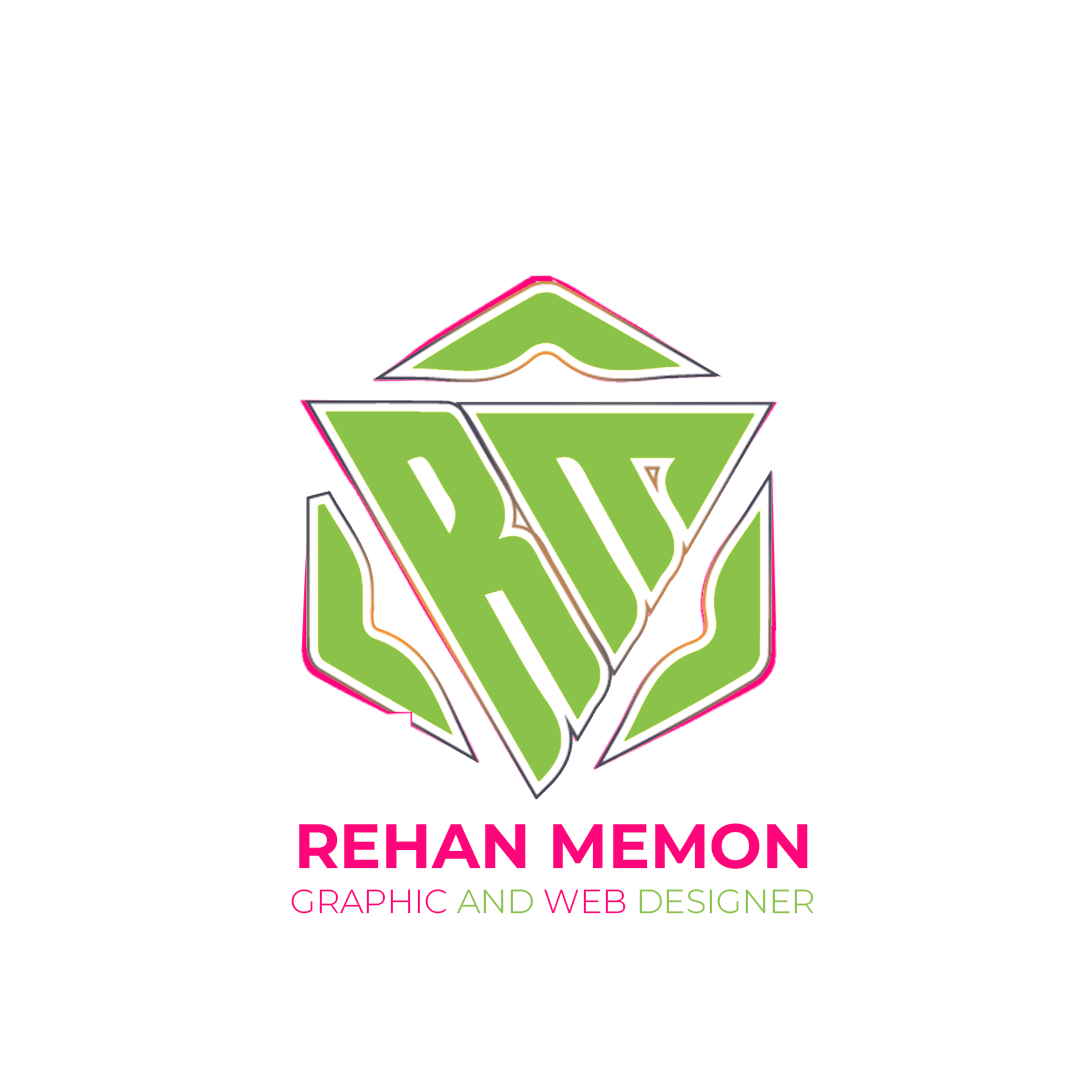
<style>
.page{position:relative;width:1080px;height:1080px;background:#ffffff}
.page>*{position:absolute;margin:0}
.t1{font:62.5px "MontserratRoman-Bold";color:#ff057b}
.t2{font:33.3px "MontserratRoman-Light";color:#8bc34a}
.t3{font:33.3px "MontserratRoman-Light";color:#ff057b}
</style>
<div class="page">
<p class="t1" style="left:299px;top:823px;width:509px;height:46px">REHAN MEMON</p>
<p class="t2" style="left:291px;top:889px;width:523px;height:25px"><span class="t3">GRAPHIC</span> AND <span class="t3">WEB </span>DESIGNER</p>
</div>
